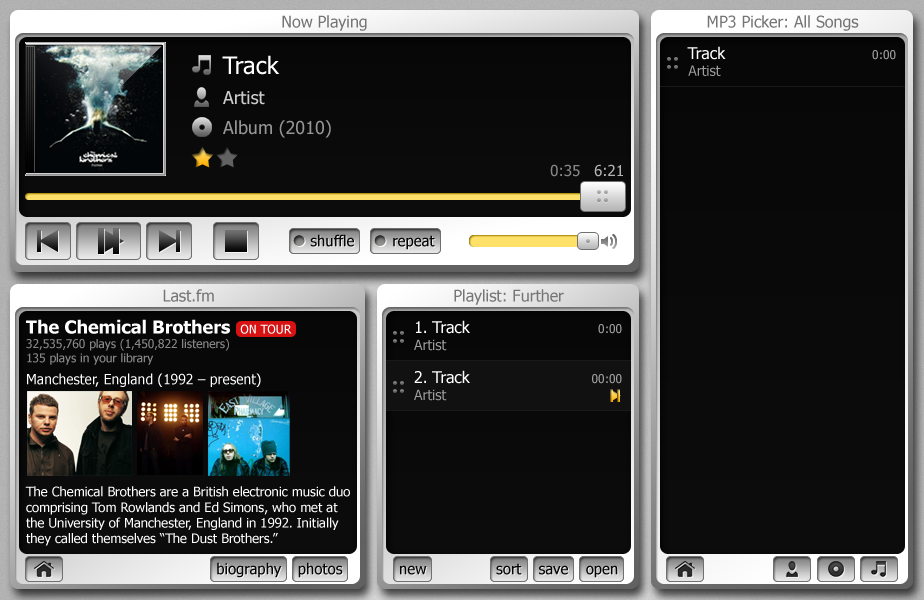
<style>
.page{position:relative;width:924px;height:600px}
.page>*{position:absolute;margin:0}
.t1{font:16px "Tahoma";color:#757575}
.t2{font:16px "Tahoma";color:#ffffff}
.t3{font:12px "Tahoma";color:#9e9e9e}
.t4{font:24px "Tahoma";color:#ffffff}
.t5{font:14px "Tahoma";color:#9e9e9e}
.t6{font:18px "Tahoma";color:#cbcbcb}
.t7{font:18px "Tahoma";color:#949494}
.t8{font:15px "Tahoma";color:#878787}
.t9{font:15px "Tahoma";color:#b4b4b4}
.t10{font:15px "Tahoma";color:#060606}
.t11{font:13px "Tahoma";color:#ffffff}
.t12{font:18px "Tahoma-Bold";color:#ffffff}
.t13{font:12px "Tahoma";color:#ffffff}
.t14{font:12px "Tahoma";color:#878787}
.t15{font:14px/22px "Tahoma";color:#ffffff}
.t16{font:14px "Tahoma";color:#ffffff}
.t17{font:13px/40px "Tahoma";color:#ffffff}
</style>
<div class="page">
<p class="t1" style="left:282px;top:15px;width:85px;height:16px">Now Playing</p>
<p class="t1" style="left:707px;top:15px;width:152px;height:16px">MP3 Picker: All Songs</p>
<p class="t2" style="left:687px;top:46px;width:39px;height:14px">Track</p>
<p class="t3" style="left:872px;top:50px;width:24px;height:10px">0:00</p>
<p class="t4" style="left:222px;top:55px;width:58px;height:20px">Track</p>
<p class="t5" style="left:688px;top:65px;width:33px;height:11px">Artist</p>
<p class="t6" style="left:223px;top:91px;width:42px;height:14px">Artist</p>
<p class="t7" style="left:223px;top:120px;width:108px;height:18px">Album (2010)</p>
<p class="t8" style="left:550px;top:164px;width:73px;height:13px">0:35<span class="t9">   6:21</span></p>
<p class="t10" style="left:310px;top:234px;width:44px;height:13px">shuffle</p>
<p class="t10" style="left:393px;top:235px;width:42px;height:15px">repeat</p>
<p class="t1" style="left:163px;top:289px;width:51px;height:13px">Last.fm</p>
<p class="t1" style="left:454px;top:289px;width:110px;height:16px">Playlist: Further</p>
<p class="t11" style="left:25px;top:319px;width:325px;height:227px"><span class="t12">The Chemical Brothers  </span><span class="t13">ON TOUR<br></span><span class="t14">32,535,760 plays (1,450,822 listeners) <br>135 plays in your library<br></span><span class="t15">Manchester</span><span class="t16">, England (1992 – present)<br><br><br><br></span><span class="t17">The </span>Chemical Brothers are a British electronic music duo comprising Tom Rowlands and Ed Simons, who met at the University of Manchester, England in 1992. Initially they called themselves “The Dust Brothers.”</p>
<p class="t2" style="left:416px;top:320px;width:54px;height:14px">1. Track</p>
<p class="t3" style="left:598px;top:324px;width:24px;height:10px">0:00</p>
<p class="t5" style="left:414px;top:339px;width:33px;height:12px">Artist</p>
<p class="t2" style="left:414px;top:370px;width:56px;height:14px">2. Track</p>
<p class="t3" style="left:592px;top:374px;width:30px;height:10px">00:00</p>
<p class="t5" style="left:414px;top:389px;width:33px;height:12px">Artist</p>
<p class="t10" style="left:217px;top:562px;width:65px;height:16px">biography</p>
<p class="t10" style="left:298px;top:562px;width:45px;height:16px">photos</p>
<p class="t10" style="left:400px;top:565px;width:27px;height:10px">new</p>
<p class="t10" style="left:496px;top:563px;width:26px;height:12px">sort</p>
<p class="t10" style="left:539px;top:565px;width:29px;height:10px">save</p>
<p class="t10" style="left:586px;top:565px;width:32px;height:13px">open</p>
</div>
